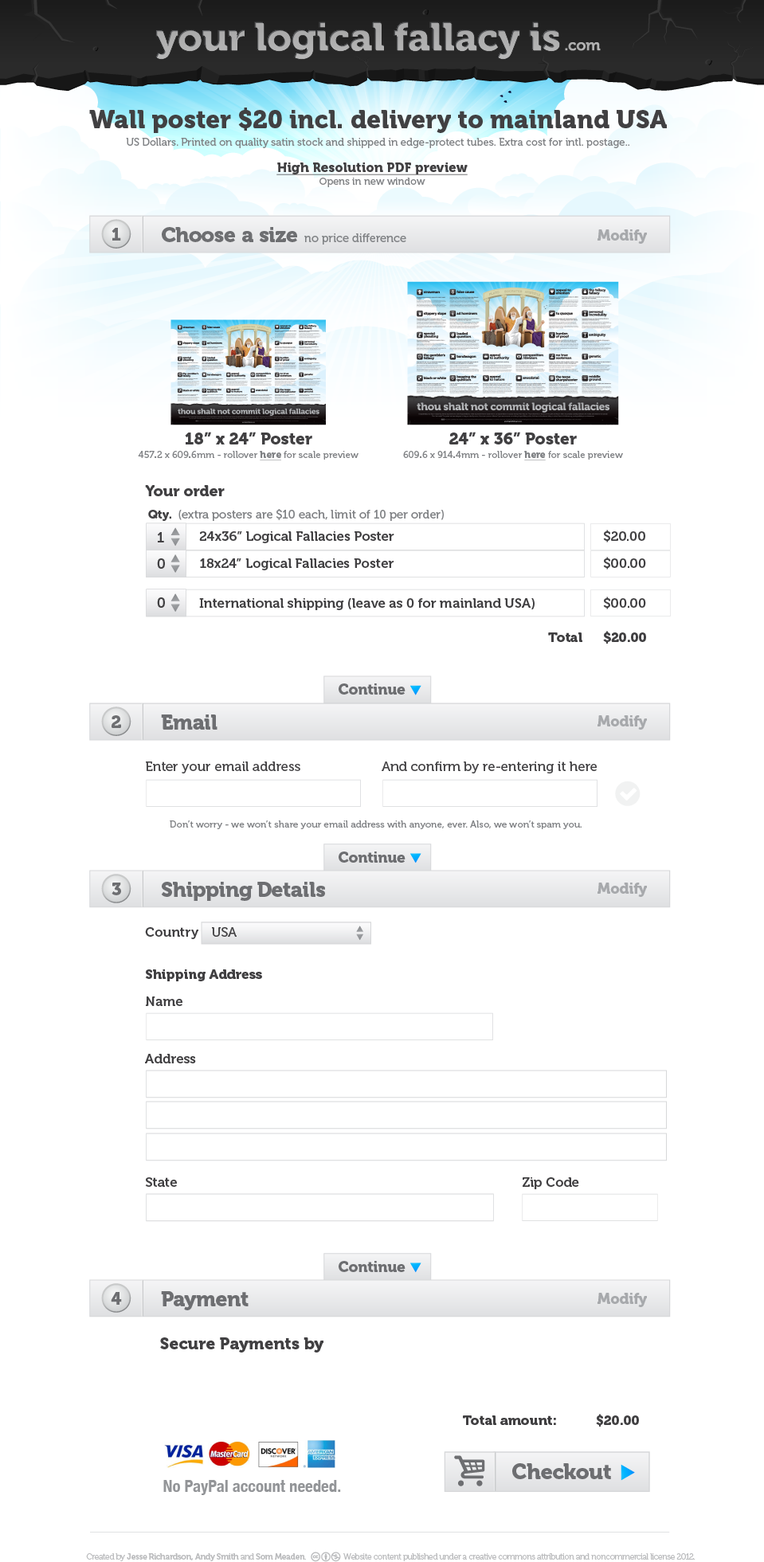
<style>
.page{position:relative;width:764px;height:1562px;background:#ffffff}
.page>*{position:absolute;margin:0}
.t1{font:10.4px/17.5px "Museo-500";color:#808285}
.t2{font:25.1px/17.5px "Museo-900";color:#414042}
.t3{font:13.2px "Museo-900";color:#414042;text-decoration:underline}
.t4{font:10px "Museo-500";color:#808285}
.t5{font:17.5px "Museo-900";letter-spacing:-0.025em;color:#6d6e71}
.t6{font:11.6px "Museo-500";color:#808285}
.t7{font:21.1px "Museo-900";letter-spacing:-0.025em;color:#6d6e71}
.t8{font:21.1px "Museo-900";letter-spacing:-0.05em;color:#6d6e71}
.t9{font:21.1px "Museo-900";color:#6d6e71}
.t10{font:21.1px "Museo-900";letter-spacing:-0.01em;color:#6d6e71}
.t11{font:14.9px "Museo-900";letter-spacing:-0.025em;color:#a7a9ac}
.t12{font:16.6px "Museo-900";color:#414042}
.t13{font:9.5px "Museo-500";color:#808285}
.t14{font:9.5px "Museo-900";color:#808285}
.t15{font:9.5px "Museo-900";color:#808285;text-decoration:underline}
.t16{font:15px "Museo-900";color:#414042}
.t17{font:11.8px "Museo-900";color:#414042}
.t18{font:11.8px "Museo-500";color:#808285}
.t19{font:14.1px "Museo-700";color:#414042}
.t20{font:13.4px "Museo-700";color:#414042}
.t21{font:13.4px "Museo-900";color:#414042}
.t22{font:14.9px "Museo-900";letter-spacing:-0.025em;color:#6d6e71}
.t23{font:13.4px "Museo-500";color:#414042}
.t24{font:21.7px "Museo-900";letter-spacing:-0.025em;color:#6d6e71}
.t25{font:16.6px "HelveticaNeue-CondensedBold";color:#939598}
.t26{font:8.3px "Museo-300";letter-spacing:-0.035em;color:#babbbd}
.t27{font:8.3px "Museo-700";letter-spacing:-0.035em;color:#babbbd}
</style>
<div class="page">
<p class="t1" style="left:89px;top:107px;width:577px;height:41px;text-align:center"><span class="t2">Wall poster $20 incl. delivery to mainland USA<br></span>US Dollars. Printed on quality satin stock and shipped in edge-protect tubes. Extra cost for intl. postage..</p>
<p class="t3" style="left:276px;top:162px;width:191px;height:13px">High Resolution PDF preview</p>
<p class="t4" style="left:319px;top:178px;width:106px;height:9px">Opens in new window</p>
<p class="t5" style="left:111px;top:228px;width:10px;height:12px">1</p>
<p class="t6" style="left:162px;top:227px;width:244px;height:17px"><span class="t7">Ch</span><span class="t8">o</span><span class="t7">os</span><span class="t9">e a </span><span class="t8">s</span><span class="t9">i</span><span class="t10">z</span><span class="t9">e </span>no price difference</p>
<p class="t11" style="left:597px;top:229px;width:50px;height:15px">Modify</p>
<p class="t12" style="left:185px;top:432px;width:127px;height:12px">18” x 24” Poster</p>
<p class="t12" style="left:449px;top:432px;width:128px;height:12px">24” x 36” Poster</p>
<p class="t13" style="left:138px;top:451px;width:220px;height:9px">457<span class="t14">.</span>2 x 609<span class="t14">.</span>6mm - rollover <span class="t15">here</span> for scale preview</p>
<p class="t13" style="left:403px;top:451px;width:220px;height:9px">609<span class="t14">.</span>6 x 914<span class="t14">.</span>4mm - rollover <span class="t15">here</span> for scale preview</p>
<p class="t16" style="left:145px;top:485px;width:80px;height:11px">Your order</p>
<p class="t17" style="left:148px;top:510px;width:23px;height:11px">Qty.</p>
<p class="t18" style="left:178px;top:509px;width:266px;height:12px">(extra posters are $10 each, limit of 10 per order)</p>
<p class="t19" style="left:157px;top:532px;width:7px;height:10px">1</p>
<p class="t20" style="left:199px;top:531px;width:195px;height:12px">24x36” Logical Fallacies Poster</p>
<p class="t20" style="left:603px;top:530px;width:42px;height:12px">$20.00</p>
<p class="t20" style="left:603px;top:557px;width:43px;height:12px">$00.00</p>
<p class="t19" style="left:157px;top:558px;width:8px;height:11px">0</p>
<p class="t20" style="left:200px;top:558px;width:193px;height:12px">18x24” Logical Fallacies Poster</p>
<p class="t19" style="left:157px;top:597px;width:8px;height:11px">0</p>
<p class="t20" style="left:199px;top:598px;width:335px;height:12px">International shipping (leave as 0 for mainland USA)</p>
<p class="t20" style="left:603px;top:596px;width:43px;height:13px">$00.00</p>
<p class="t21" style="left:548px;top:632px;width:34px;height:10px">Total</p>
<p class="t21" style="left:603px;top:631px;width:43px;height:12px">$20.00</p>
<p class="t22" style="left:338px;top:683px;width:67px;height:11px">Continue</p>
<p class="t5" style="left:111px;top:715px;width:10px;height:13px">2</p>
<p class="t7" style="left:161px;top:714px;width:56px;height:15px">Email</p>
<p class="t11" style="left:597px;top:715px;width:50px;height:14px">Modify</p>
<p class="t23" style="left:146px;top:761px;width:154px;height:12px">Enter your email address</p>
<p class="t23" style="left:381px;top:761px;width:215px;height:12px">And confirm by re-entering it here</p>
<p class="t13" style="left:170px;top:820px;width:411px;height:9px">Don’t worry - we won’t share your email address with anyone, ever. Also, we won’t spam you.</p>
<p class="t22" style="left:338px;top:851px;width:67px;height:11px">Continue</p>
<p class="t7" style="left:161px;top:881px;width:164px;height:20px">Shipping Details</p>
<p class="t5" style="left:111px;top:882px;width:10px;height:13px">3</p>
<p class="t11" style="left:597px;top:882px;width:50px;height:15px">Modify</p>
<p class="t20" style="left:145px;top:927px;width:53px;height:12px">Country</p>
<p class="t23" style="left:212px;top:927px;width:24px;height:9px">USA</p>
<p class="t21" style="left:145px;top:969px;width:117px;height:12px">Shipping Address</p>
<p class="t20" style="left:146px;top:996px;width:36px;height:10px">Name</p>
<p class="t20" style="left:145px;top:1053px;width:51px;height:10px">Address</p>
<p class="t20" style="left:145px;top:1177px;width:32px;height:9px">State</p>
<p class="t20" style="left:522px;top:1177px;width:57px;height:12px">Zip Code</p>
<p class="t22" style="left:338px;top:1261px;width:67px;height:11px">Continue</p>
<p class="t5" style="left:111px;top:1292px;width:11px;height:12px">4</p>
<p class="t7" style="left:161px;top:1291px;width:87px;height:19px">Payment</p>
<p class="t11" style="left:597px;top:1292px;width:50px;height:15px">Modify</p>
<p class="t12" style="left:160px;top:1337px;width:163px;height:15px">Secure Payments by</p>
<p class="t21" style="left:463px;top:1415px;width:93px;height:10px">Total amount:</p>
<p class="t21" style="left:596px;top:1413px;width:43px;height:13px">$20.00</p>
<p class="t24" style="left:512px;top:1463px;width:99px;height:16px">Checkout</p>
<p class="t25" style="left:163px;top:1479px;width:178px;height:16px">No PayPal account needed.</p>
<p class="t26" style="left:86px;top:1553px;width:609px;height:8px">Created by <span class="t27">Jesse Richardson, Andy Smith</span> and <span class="t27">Som Meaden</span>.                   Website content published under a creative commons attribution and noncommercial license 2012.</p>
</div>
